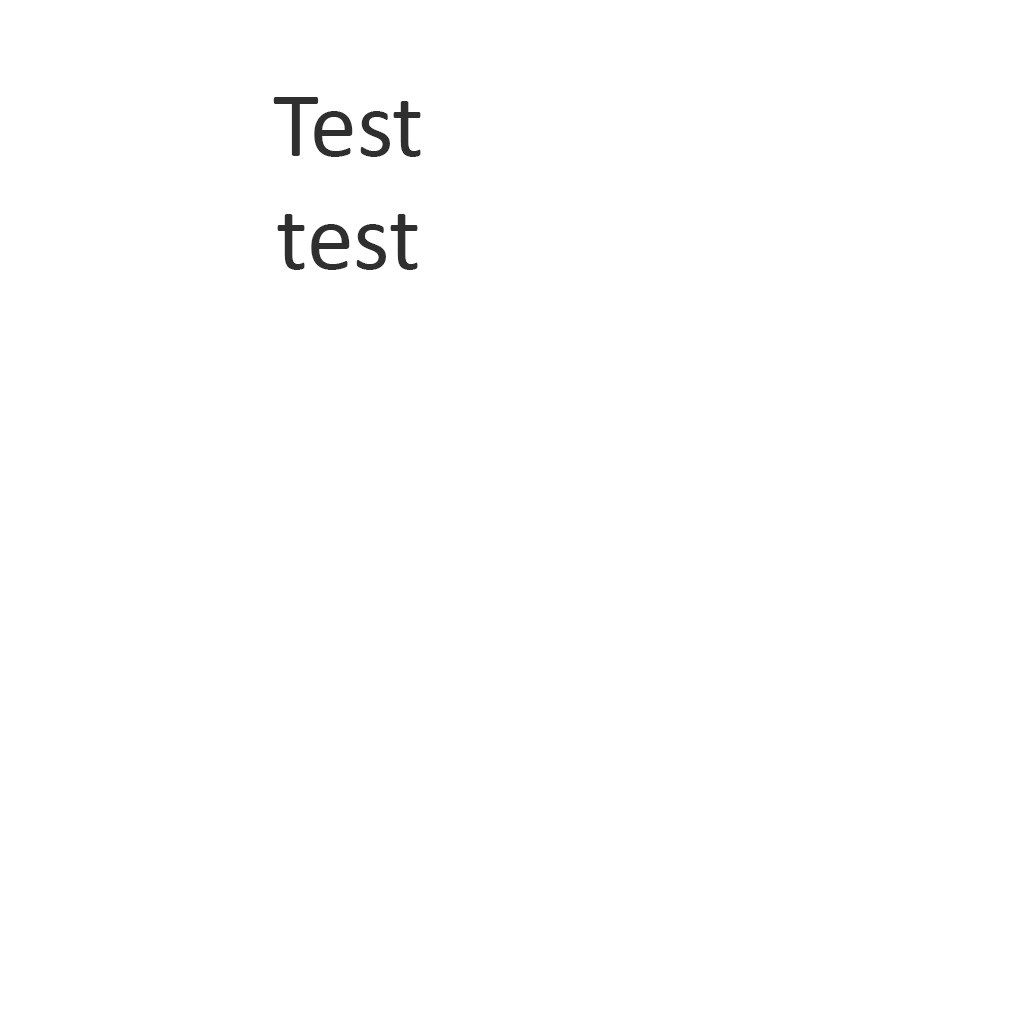
<style>
.page{position:relative;width:1024px;height:1024px;background:#ffffff}
.page>*{position:absolute;margin:0}
.t1{font:94px "Calibri";color:#302f2f}
</style>
<div class="page">
<p class="t1" style="left:273px;top:97px;width:148px;height:173px;text-align:center">Test<br>test</p>
</div>
